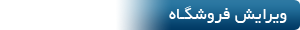
<style>
.page{position:relative;width:300px;height:30px;background:#ffffff}
.page>*{position:absolute;margin:0}
.t1{font:18.3px "BYekan";color:#ffffff}
</style>
<div class="page">
<p class="t1" style="left:169px;top:6px;width:118px;height:17px">ویرایش فروشگـاه</p>
</div>
